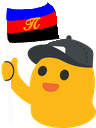
<style>
.page{position:relative;width:96px;height:128px;background:#ffffff}
.page>*{position:absolute;margin:0}
.t1{font:15.2px "SnellRoundhand-Bold";color:#fbb817;font-weight:bold}
</style>
<div class="page">
<p class="t1" style="left:23px;top:17px;width:18px;height:14px;rotate:-7deg">Π</p>
</div>
